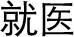
<style>
.page{position:relative;width:74px;height:37px;background:#ffffff}
.page>*{position:absolute;margin:0}
.t1{font:38.9px "STHeitiTC-Light";color:#000000}
</style>
<div class="page">
<p class="t1" style="left:0px;top:0px;width:74px;height:37px">就医</p>
</div>
